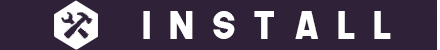
<style>
.page{position:relative;width:440px;height:50px;background:#2f2137}
.page>*{position:absolute;margin:0}
.t1{font:37.5px "TheNextFont";letter-spacing:0.48em;color:#ffffff}
</style>
<div class="page">
<p class="t1" style="left:143px;top:11px;width:248px;height:28px">INSTALL</p>
</div>
